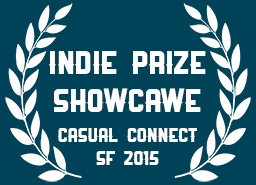
<style>
.page{position:relative;width:256px;height:185px;background:#004358}
.page>*{position:absolute;margin:0}
.t1{font:32px "Ranger-Regular";color:#ffffff}
.t2{font:19px "Ranger-Regular";color:#ffffff}
</style>
<div class="page">
<p class="t1" style="left:49px;top:51px;width:157px;height:61px;text-align:center">Indie Prize<br>Showcawe</p>
<p class="t2" style="left:58px;top:128px;width:139px;height:37px;text-align:center">Casual Connect<br>SF 2015</p>
</div>
